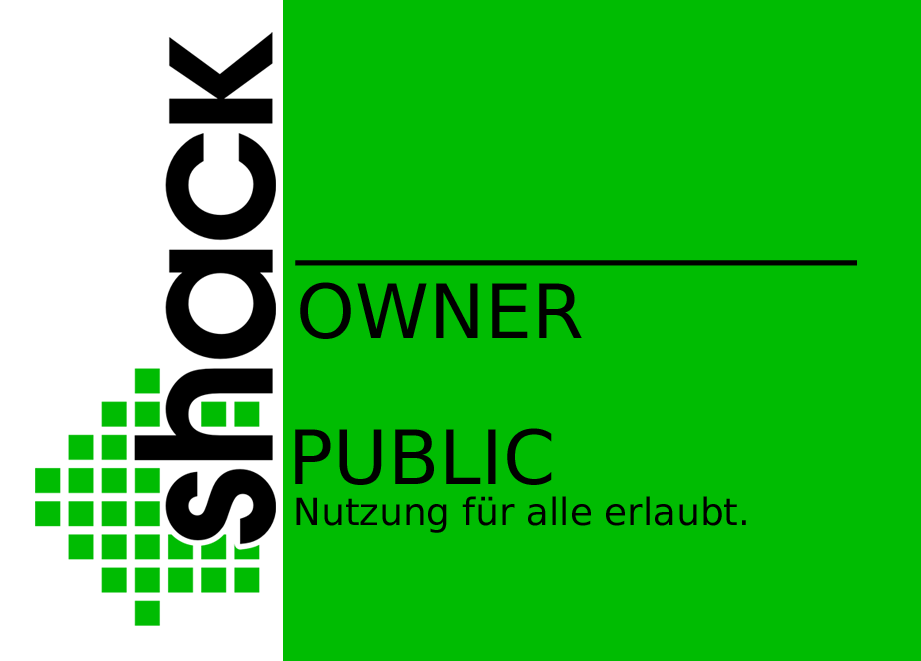
<style>
.page{position:relative;width:921px;height:661px;background:#00bc02}
.page>*{position:absolute;margin:0}
.t1{font:74.7px "PrimaSansBT-Roman";color:#000000}
.t2{font:37.4px "PrimaSansBT-Roman";color:#000000}
</style>
<div class="page">
<p class="t1" style="left:295px;top:260px;width:562px;height:79px">_______________<br>OWNER</p>
<p class="t1" style="left:295px;top:428px;width:257px;height:57px">PUBLIC</p>
<p class="t2" style="left:296px;top:496px;width:450px;height:37px">Nutzung für alle erlaubt.</p>
</div>
